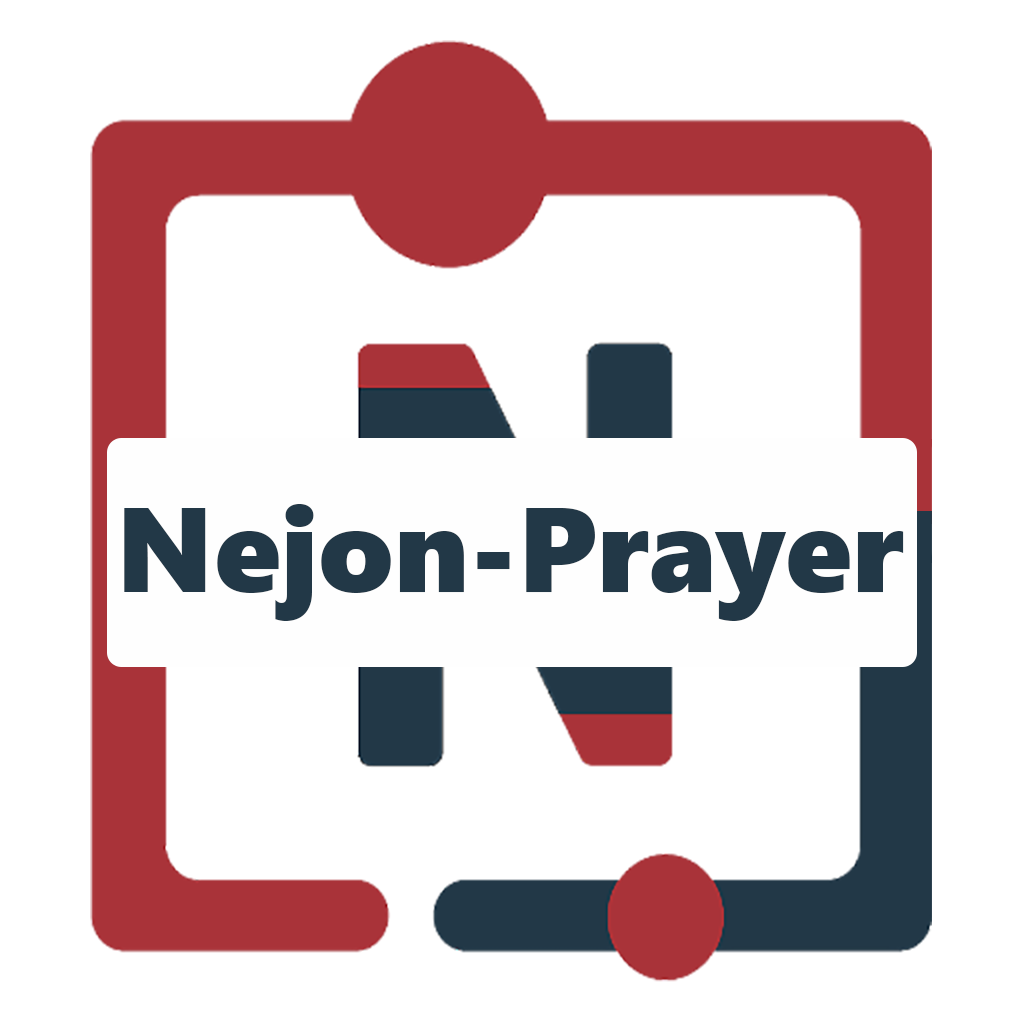
<style>
.page{position:relative;width:1024px;height:1024px;background:#ffffff}
.page>*{position:absolute;margin:0}
.t1{font:120px "SegoeUIBlack";color:#223847}
</style>
<div class="page">
<p class="t1" style="left:124px;top:504px;width:780px;height:117px">Nejon-Prayer</p>
</div>
